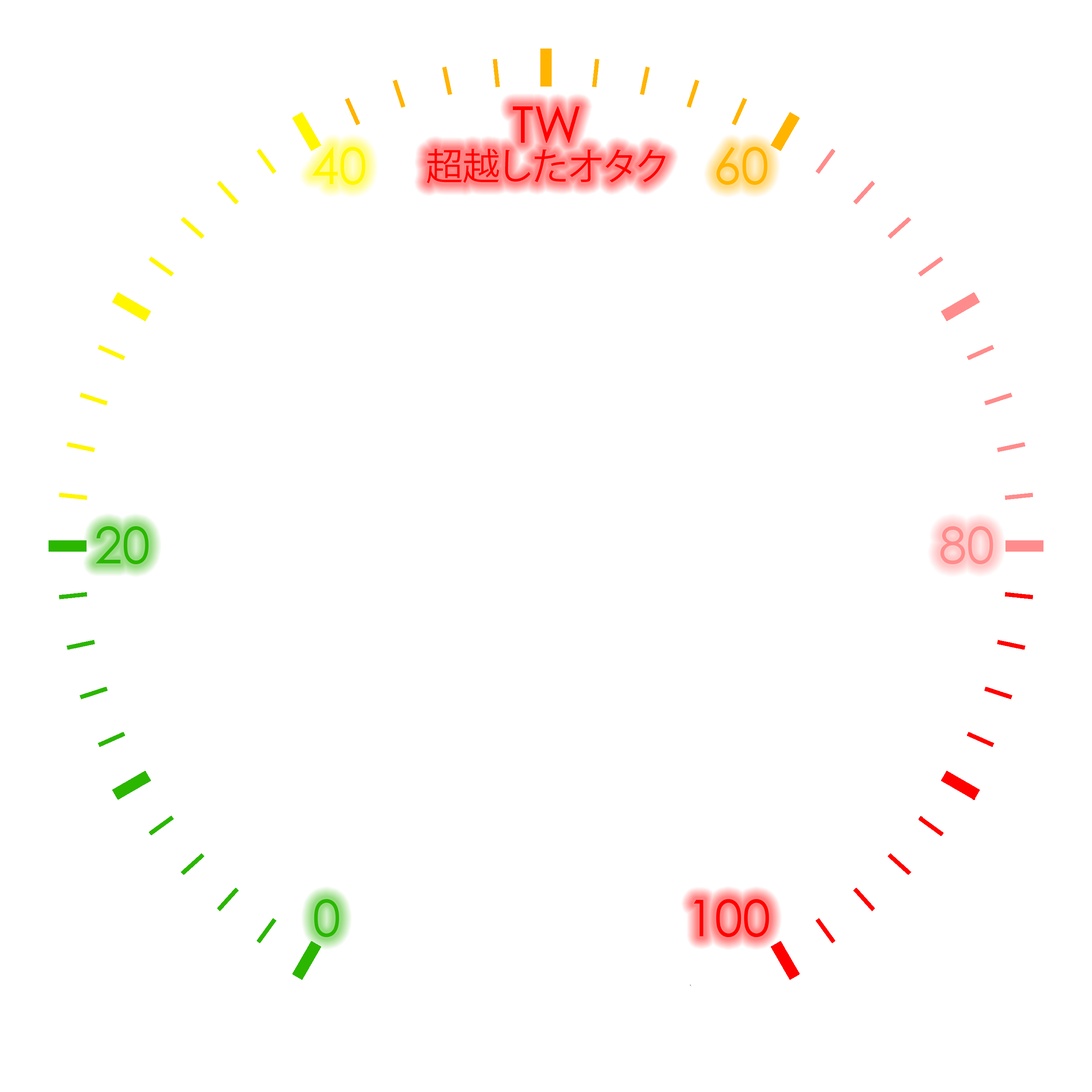
<style>
.page{position:relative;width:1092px;height:1092px;background:#ffffff}
.page>*{position:absolute;margin:0}
.t1{font:50.6px "CenturyGothic";color:#ff0000}
.t2{font:50.6px "CenturyGothic";color:#fff600}
.t3{font:37.1px "KozGoPr6N-Regular";color:#ff0000}
.t4{font:50.6px "CenturyGothic";color:#ffb400}
.t5{font:50.6px "CenturyGothic";color:#2bb600}
.t6{font:50.6px "CenturyGothic";color:#ff8c8c}
</style>
<div class="page">
<p class="t1" style="left:513px;top:106px;width:67px;height:37px">TW</p>
<p class="t2" style="left:312px;top:147px;width:54px;height:38px">40</p>
<p class="t3" style="left:427px;top:148px;width:239px;height:36px">超越したオタク</p>
<p class="t4" style="left:716px;top:147px;width:52px;height:38px">60</p>
<p class="t5" style="left:95px;top:526px;width:54px;height:38px">20</p>
<p class="t6" style="left:940px;top:526px;width:53px;height:38px">80</p>
<p class="t5" style="left:314px;top:899px;width:25px;height:38px">0</p>
<p class="t1" style="left:694px;top:899px;width:75px;height:38px">100</p>
</div>
